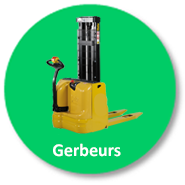
<style>
.page{position:relative;width:185px;height:185px;background:#00cc66}
.page>*{position:absolute;margin:0}
.t1{font:18px "Calibri-Bold";color:#ffffff}
</style>
<div class="page">
<p class="t1" style="left:53px;top:143px;width:68px;height:14px">Gerbeurs</p>
</div>
